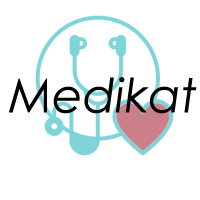
<style>
.page{position:relative;width:200px;height:200px;background:#ffffff}
.page>*{position:absolute;margin:0}
.t1{font:47.2px "CenturyGothic-Italic";color:#010101}
</style>
<div class="page">
<p class="t1" style="left:9px;top:77px;width:188px;height:37px">Medikat</p>
</div>
